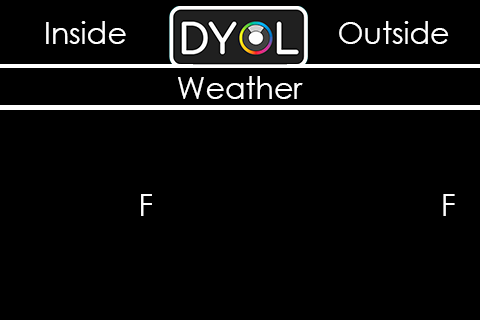
<style>
.page{position:relative;width:480px;height:320px;background:#000000}
.page>*{position:absolute;margin:0}
.t1{font:30px "CenturyGothic";color:#ffffff}
</style>
<div class="page">
<p class="t1" style="left:46px;top:21px;width:80px;height:23px">Inside</p>
<p class="t1" style="left:339px;top:21px;width:110px;height:23px">Outside</p>
<p class="t1" style="left:178px;top:76px;width:125px;height:23px">Weather</p>
<p class="t1" style="left:141px;top:194px;width:11px;height:22px">F</p>
<p class="t1" style="left:443px;top:194px;width:12px;height:22px">F</p>
</div>
